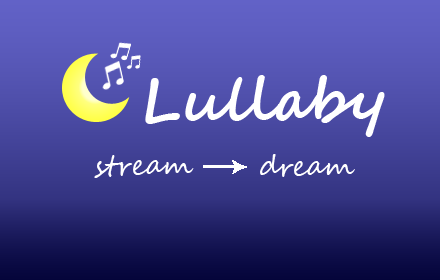
<style>
.page{position:relative;width:440px;height:280px}
.page>*{position:absolute;margin:0}
.t1{font:60px "SegoeScript-Bold";color:#ffffff}
.t2{font:28px "SegoeScript";color:#ffffff}
</style>
<div class="page">
<p class="t1" style="left:145px;top:75px;width:240px;height:62px">Lullaby</p>
<p class="t2" style="left:94px;top:155px;width:100px;height:23px">stream</p>
<p class="t2" style="left:260px;top:154px;width:95px;height:23px">dream</p>
</div>
